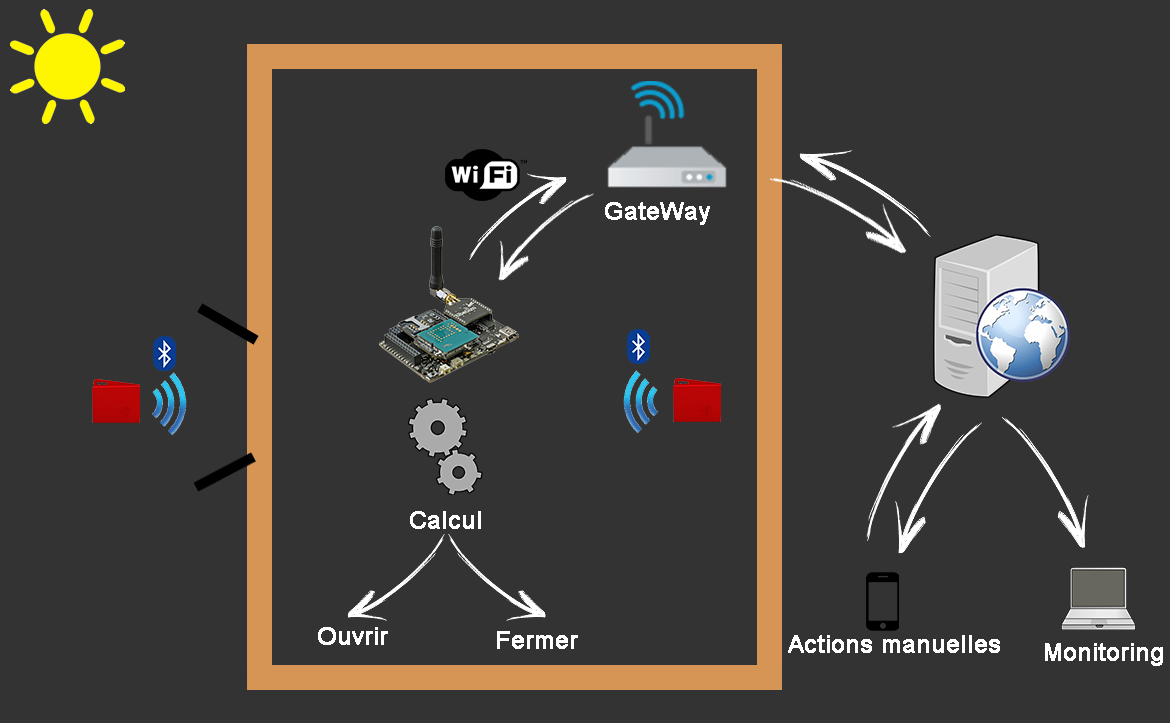
<style>
.page{position:relative;width:1170px;height:723px;background:#333333}
.page>*{position:absolute;margin:0}
.t1{font:24px "ArialMT";color:#ffffff;font-weight:bold}
</style>
<div class="page">
<p class="t1" style="left:605px;top:202px;width:105px;height:23px">GateWay</p>
<p class="t1" style="left:410px;top:511px;width:71px;height:18px">Calcul</p>
<p class="t1" style="left:318px;top:627px;width:70px;height:18px">Ouvrir</p>
<p class="t1" style="left:497px;top:631px;width:81px;height:18px">Fermer</p>
<p class="t1" style="left:788px;top:635px;width:212px;height:18px">Actions manuelles</p>
<p class="t1" style="left:1045px;top:643px;width:118px;height:23px">Monitoring</p>
</div>
